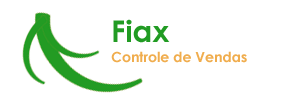
<style>
.page{position:relative;width:300px;height:102px;background:#ffffff}
.page>*{position:absolute;margin:0}
.t1{font:30px "CenturyGothic-Bold";color:#219b23}
.t2{font:14px "CenturyGothic-Bold";color:#f0ad4e}
</style>
<div class="page">
<p class="t1" style="left:113px;top:19px;width:57px;height:24px">Fiax</p>
<p class="t2" style="left:111px;top:51px;width:136px;height:12px">Controle de Vendas</p>
</div>
